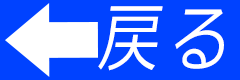
<style>
.page{position:relative;width:240px;height:80px;background:#0042ff}
.page>*{position:absolute;margin:0}
.t1{font:75px "Meiryo";color:#ffffff;font-style:italic;scale:0.8 1}
</style>
<div class="page">
<p class="t1" style="left:98px;top:6px;width:126px;height:65px">戻る</p>
</div>
